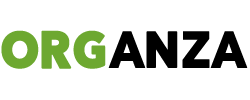
<style>
.page{position:relative;width:250px;height:100px;background:#ffffff}
.page>*{position:absolute;margin:0}
.t1{font:50px "Sovereign";letter-spacing:0.02em;color:#000000}
.t2{font:50px "Sovereign";letter-spacing:0.02em;color:#6da830;font-weight:bold}
</style>
<div class="page">
<p class="t1" style="left:1px;top:30px;width:247px;height:39px"><span class="t2">ORG</span>ANZA</p>
</div>
